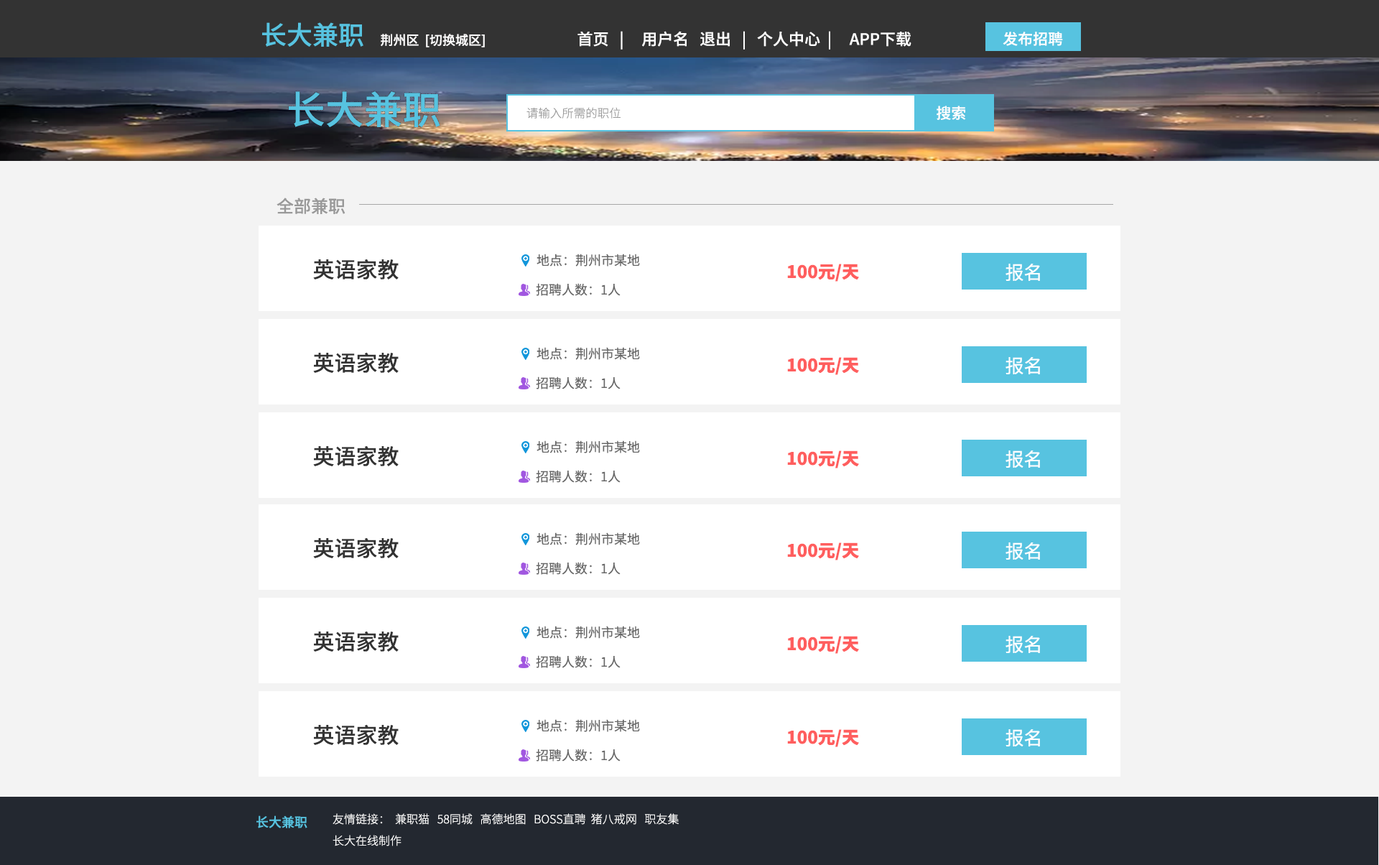
<style>
.page{position:relative;width:1379px;height:865px;background:#f3f3f3}
.page>*{position:absolute;margin:0}
.t1{font:25.9px "SourceHanSansCN-Medium";color:#57c3e0}
.t2{font:12.9px "SourceHanSansCN-Medium";color:#fffefe}
.t3{font:15.8px "SourceHanSansCN-Medium";color:#ffffff}
.t4{font:14.9px "SourceHanSansCN-Medium";color:#fffefe}
.t5{font:38.6px "SourceHanSansCN-Medium";color:#57c3e0}
.t6{font:11.7px "SourceHanSansCN-Light";color:#999999}
.t7{font:17.2px "SourceHanSansCN-Medium";color:#999999}
.t8{font:12.9px "SourceHanSansCN-Regular";color:#666666}
.t9{font:21.5px "SourceHanSansCN-Medium";color:#333333}
.t10{font:17.2px "SourceHanSansCN-Heavy";color:#ff5e5e}
.t11{font:18.7px "SourceHanSansCN-Regular";color:#ffffff}
.t12{font:12.9px "SourceHanSansCN-Medium";color:#57c3e0}
.t13{font:11.5px "SourceHanSansCN-Light";color:#ffffff}
</style>
<div class="page">
<p class="t1" style="left:262px;top:22px;width:101px;height:25px">长大兼职</p>
<p class="t2" style="left:381px;top:34px;width:104px;height:13px">荆州区  [切换城区]</p>
<p class="t3" style="left:577px;top:31px;width:334px;height:19px">首页   |     用户名   退出   |   个人中心  |     APP下载</p>
<p class="t4" style="left:1003px;top:32px;width:60px;height:14px">发布招聘</p>
<p class="t5" style="left:289px;top:91px;width:151px;height:36px">长大兼职</p>
<p class="t6" style="left:526px;top:107px;width:95px;height:12px">请输入所需的职位</p>
<p class="t4" style="left:937px;top:106px;width:29px;height:14px">搜索</p>
<p class="t7" style="left:277px;top:198px;width:68px;height:16px">全部兼职</p>
<p class="t8" style="left:537px;top:254px;width:103px;height:12px">地点：荆州市某地</p>
<p class="t9" style="left:313px;top:259px;width:86px;height:20px">英语家教</p>
<p class="t10" style="left:787px;top:264px;width:72px;height:18px">100元/天</p>
<p class="t11" style="left:1005px;top:264px;width:35px;height:17px">报名</p>
<p class="t8" style="left:536px;top:283px;width:85px;height:13px">招聘人数：1人</p>
<p class="t9" style="left:313px;top:352px;width:86px;height:21px">英语家教</p>
<p class="t8" style="left:537px;top:347px;width:103px;height:13px">地点：荆州市某地</p>
<p class="t10" style="left:787px;top:357px;width:72px;height:18px">100元/天</p>
<p class="t11" style="left:1005px;top:357px;width:35px;height:17px">报名</p>
<p class="t8" style="left:536px;top:376px;width:85px;height:13px">招聘人数：1人</p>
<p class="t9" style="left:313px;top:445px;width:86px;height:21px">英语家教</p>
<p class="t8" style="left:537px;top:440px;width:103px;height:13px">地点：荆州市某地</p>
<p class="t10" style="left:787px;top:450px;width:72px;height:18px">100元/天</p>
<p class="t11" style="left:1005px;top:450px;width:35px;height:18px">报名</p>
<p class="t8" style="left:536px;top:470px;width:85px;height:13px">招聘人数：1人</p>
<p class="t8" style="left:537px;top:532px;width:103px;height:13px">地点：荆州市某地</p>
<p class="t9" style="left:313px;top:537px;width:86px;height:21px">英语家教</p>
<p class="t10" style="left:787px;top:542px;width:72px;height:18px">100元/天</p>
<p class="t11" style="left:1005px;top:542px;width:35px;height:17px">报名</p>
<p class="t8" style="left:536px;top:562px;width:85px;height:13px">招聘人数：1人</p>
<p class="t8" style="left:537px;top:626px;width:103px;height:12px">地点：荆州市某地</p>
<p class="t9" style="left:313px;top:631px;width:86px;height:20px">英语家教</p>
<p class="t10" style="left:787px;top:636px;width:72px;height:18px">100元/天</p>
<p class="t11" style="left:1005px;top:636px;width:35px;height:17px">报名</p>
<p class="t8" style="left:536px;top:655px;width:85px;height:13px">招聘人数：1人</p>
<p class="t9" style="left:313px;top:724px;width:86px;height:21px">英语家教</p>
<p class="t8" style="left:537px;top:719px;width:103px;height:13px">地点：荆州市某地</p>
<p class="t10" style="left:787px;top:729px;width:72px;height:18px">100元/天</p>
<p class="t11" style="left:1005px;top:729px;width:35px;height:17px">报名</p>
<p class="t8" style="left:536px;top:748px;width:85px;height:13px">招聘人数：1人</p>
<p class="t12" style="left:256px;top:815px;width:51px;height:13px">长大兼职</p>
<p class="t13" style="left:333px;top:813px;width:346px;height:12px">友情链接：  兼职猫   58同城   高德地图   BOSS直聘  猪八戒网   职友集</p>
<p class="t13" style="left:333px;top:835px;width:68px;height:11px">长大在线制作</p>
</div>
